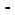
<style>
.page{position:relative;width:15px;height:15px;background:#ffffff}
.page>*{position:absolute;margin:0}
.t1{font:16px "Mandatory";color:#000000}
</style>
<div class="page">
<p class="t1" style="left:5px;top:7px;width:5px;height:2px">-</p>
</div>
